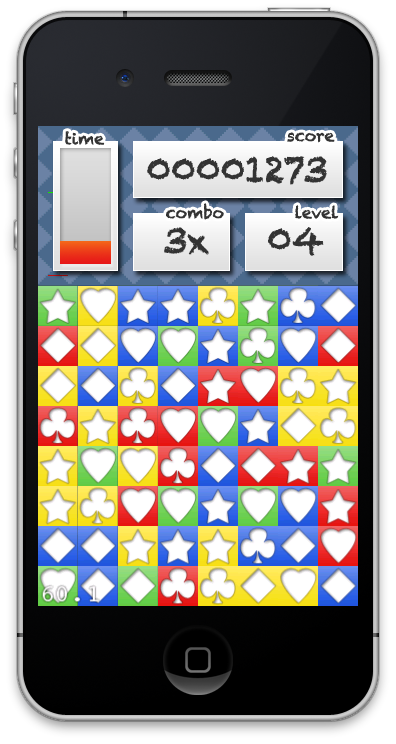
<style>
.page{position:relative;width:396px;height:744px}
.page>*{position:absolute;margin:0}
.t1{font:16px "Chalkduster";color:#333333}
.t2{font:36px "Chalkduster";color:#333333}
</style>
<div class="page">
<p class="t1" style="left:65px;top:131px;width:40px;height:14px">time</p>
<p class="t1" style="left:287px;top:132px;width:48px;height:11px">score</p>
<p class="t2" style="left:147px;top:156px;width:180px;height:29px">00001273</p>
<p class="t1" style="left:166px;top:203px;width:58px;height:17px">combo</p>
<p class="t1" style="left:295px;top:205px;width:44px;height:14px">level</p>
<p class="t2" style="left:164px;top:227px;width:45px;height:28px">3x</p>
<p class="t2" style="left:268px;top:227px;width:56px;height:29px">04</p>
</div>
